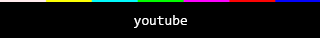
<style>
.page{position:relative;width:320px;height:38px;background:#000000}
.page>*{position:absolute;margin:0}
.t1{font:14px "Consolas";color:#ffffff}
</style>
<div class="page">
<p class="t1" style="left:134px;top:15px;width:53px;height:13px">youtube</p>
</div>
